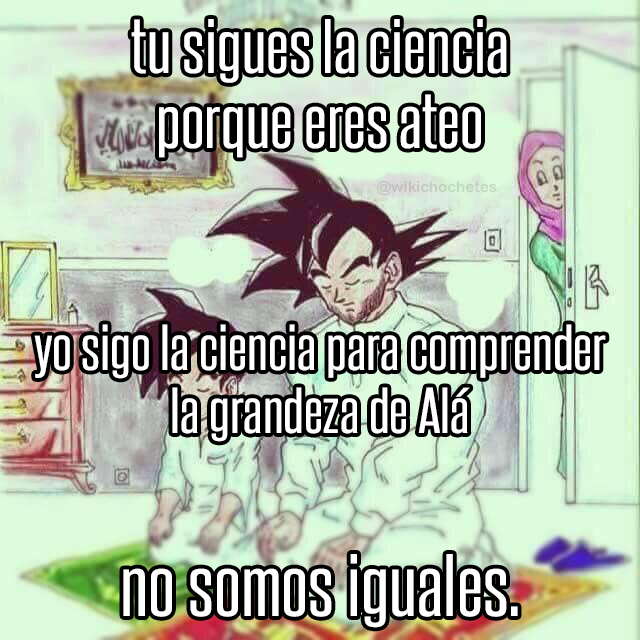
<style>
.page{position:relative;width:640px;height:640px}
.page>*{position:absolute;margin:0}
.t1{font:65.7px "SteelfishRg-Regular";color:#ffffff;scale:1.24 1}
.t2{font:15.3px "ArialRoundedMTBold";color:#c1cdc0}
.t3{font:55.4px "SteelfishRg-Regular";color:#ffffff;scale:1.24 1}
.t4{font:75.2px "SteelfishRg-Regular";color:#ffffff;scale:1.24 1}
</style>
<div class="page">
<p class="t1" style="left:131px;top:19px;width:376px;height:139px;text-align:center">tu sigues la ciencia<br>porque eres ateo</p>
<p class="t2" style="left:376px;top:181px;width:121px;height:15px">@wikichochetes</p>
<p class="t3" style="left:34px;top:324px;width:572px;height:118px;text-align:center">yo sigo la ciencia para comprender<br>la grandeza de Alá</p>
<p class="t4" style="left:123px;top:554px;width:395px;height:74px">no somos iguales.</p>
</div>
